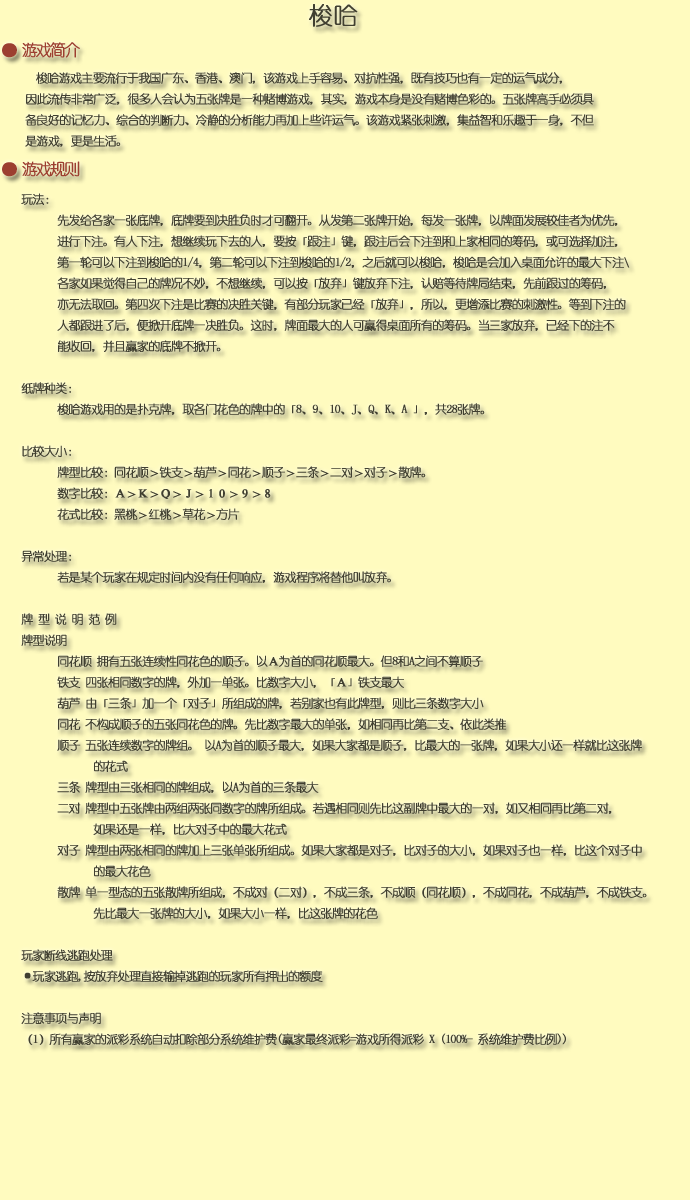
<style>
.page{position:relative;width:690px;height:1200px;background:#fffbbf}
.page>*{position:absolute;margin:0}
.t1{font:24px "YouYuan";color:#403f30;font-weight:bold}
.t2{font:16px "YouYuan";letter-spacing:-0.14em;color:#9c3f30;font-weight:bold}
.t3{font:12px "YouYuan";letter-spacing:-0.08em;color:#403f30;font-weight:bold}
</style>
<div class="page">
<p class="t1" style="left:309px;top:4px;width:49px;height:23px">梭哈</p>
<p class="t2" style="left:2px;top:42px;width:78px;height:16px">● 游戏简介</p>
<p class="t3" style="left:25px;top:72px;width:569px;height:75px">梭哈游戏主要流行于我国广东、香港、澳门，该游戏上手容易、对抗性强，既有技巧也有一定的运气成分，<br>因此流传非常广泛，很多人会认为五张牌是一种赌博游戏，其实，游戏本身是没有赌博色彩的。五张牌高手必须具<br>备良好的记忆力、综合的判断力、冷静的分析能力再加上些许运气。该游戏紧张刺激，集益智和乐趣于一身，不但<br>是游戏，更是生活。</p>
<p class="t2" style="left:2px;top:161px;width:78px;height:16px">● 游戏规则</p>
<p class="t3" style="left:21px;top:193px;width:626px;height:852px">玩法：<br> 先发给各家一张底牌，底牌要到决胜负时才可翻开。从发第二张牌开始，每发一张牌，以牌面发展较佳者为优先，<br> 进行下注。有人下注，想继续玩下去的人，要按「跟注」键，跟注后会下注到和上家相同的筹码，或可选择加注，<br> 第一轮可以下注到梭哈的1/4，第二轮可以下注到梭哈的1/2，之后就可以梭哈，梭哈是会加入桌面允许的最大下注\<br> 各家如果觉得自己的牌况不妙，不想继续，可以按「放弃」键放弃下注，认赔等待牌局结束，先前跟过的筹码，<br> 亦无法取回。第四次下注是比赛的决胜关键，有部分玩家已经「放弃」，所以，更增添比赛的刺激性。等到下注的<br> 人都跟进了后，便掀开底牌一决胜负。这时，牌面最大的人可赢得桌面所有的筹码。当三家放弃，已经下的注不<br> 能收回，并且赢家的底牌不掀开。 <br><br>纸牌种类：<br> 梭哈游戏用的是扑克牌，取各门花色的牌中的「8、9、10、J、Q、K、A 」，共28张牌。<br><br>比较大小：<br> 牌型比较：同花顺＞铁支＞葫芦＞同花＞顺子＞三条＞二对＞对子＞散牌。<br> 数字比较：Ａ＞Ｋ＞Ｑ＞Ｊ＞１０＞９＞８ <br> 花式比较：黑桃＞红桃＞草花＞方片<br><br>异常处理：<br> 若是某个玩家在规定时间内没有任何响应，游戏程序将替他叫放弃。<br><br>牌 型 说 明 范 例 <br>牌型说明 <br> 同花顺 拥有五张连续性同花色的顺子。以Ａ为首的同花顺最大。但8和A之间不算顺子 <br> 铁支 四张相同数字的牌，外加一单张。比数字大小，「Ａ」铁支最大 <br> 葫芦 由「三条」加一个「对子」所组成的牌，若别家也有此牌型，则比三条数字大小 <br> 同花 不构成顺子的五张同花色的牌。先比数字最大的单张，如相同再比第二支、依此类推 <br> 顺子 五张连续数字的牌组。 以A为首的顺子最大，如果大家都是顺子，比最大的一张牌，如果大小还一样就比这张牌<br>  的花式 <br> 三条 牌型由三张相同的牌组成，以A为首的三条最大 <br> 二对 牌型中五张牌由两组两张同数字的牌所组成。若遇相同则先比这副牌中最大的一对，如又相同再比第二对，<br>  如果还是一样，比大对子中的最大花式 <br> 对子 牌型由两张相同的牌加上三张单张所组成。如果大家都是对子，比对子的大小，如果对子也一样，比这个对子中<br>  的最大花色 <br> 散牌 单一型态的五张散牌所组成，不成对（二对），不成三条，不成顺（同花顺），不成同花，不成葫芦，不成铁支。<br>  先比最大一张牌的大小，如果大小一样，比这张牌的花色 <br><br>玩家断线逃跑处理<br>·玩家逃跑,按放弃处理直接输掉逃跑的玩家所有押出的额度<br><br>注意事项与声明<br>（1）所有赢家的派彩系统自动扣除部分系统维护费(赢家最终派彩=游戏所得派彩 X (100%- 系统维护费比例))</p>
</div>
